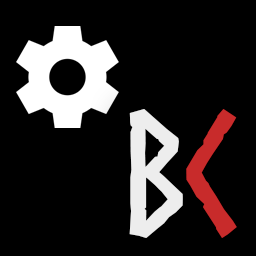
<style>
.page{position:relative;width:256px;height:256px;background:#000000}
.page>*{position:absolute;margin:0}
.t1{font:170px "Norse-Bold";color:#ededed}
.t2{font:170px "Norse-Bold";color:#c82b2b}
</style>
<div class="page">
<p class="t1" style="left:129px;top:109px;width:108px;height:129px">B<span class="t2">C</span></p>
</div>
